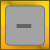
<style>
.page{position:relative;width:50px;height:50px;background:#a3a3a3}
.page>*{position:absolute;margin:0}
.t1{font:48px "Verdana";color:#636363}
</style>
<div class="page">
<p class="t1" style="left:16px;top:24px;width:16px;height:4px">-</p>
</div>
